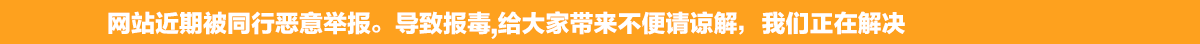
<style>
.page{position:relative;width:1200px;height:44px;background:#fea11e}
.page>*{position:absolute;margin:0}
.t1{font:24px "FZLTTHK--GBK1-0";color:#ffffff}
</style>
<div class="page">
<p class="t1" style="left:108px;top:11px;width:797px;height:28px">网站近期被同行恶意举报。导致报毒,给大家带来不便请谅解，我们正在解决</p>
</div>
